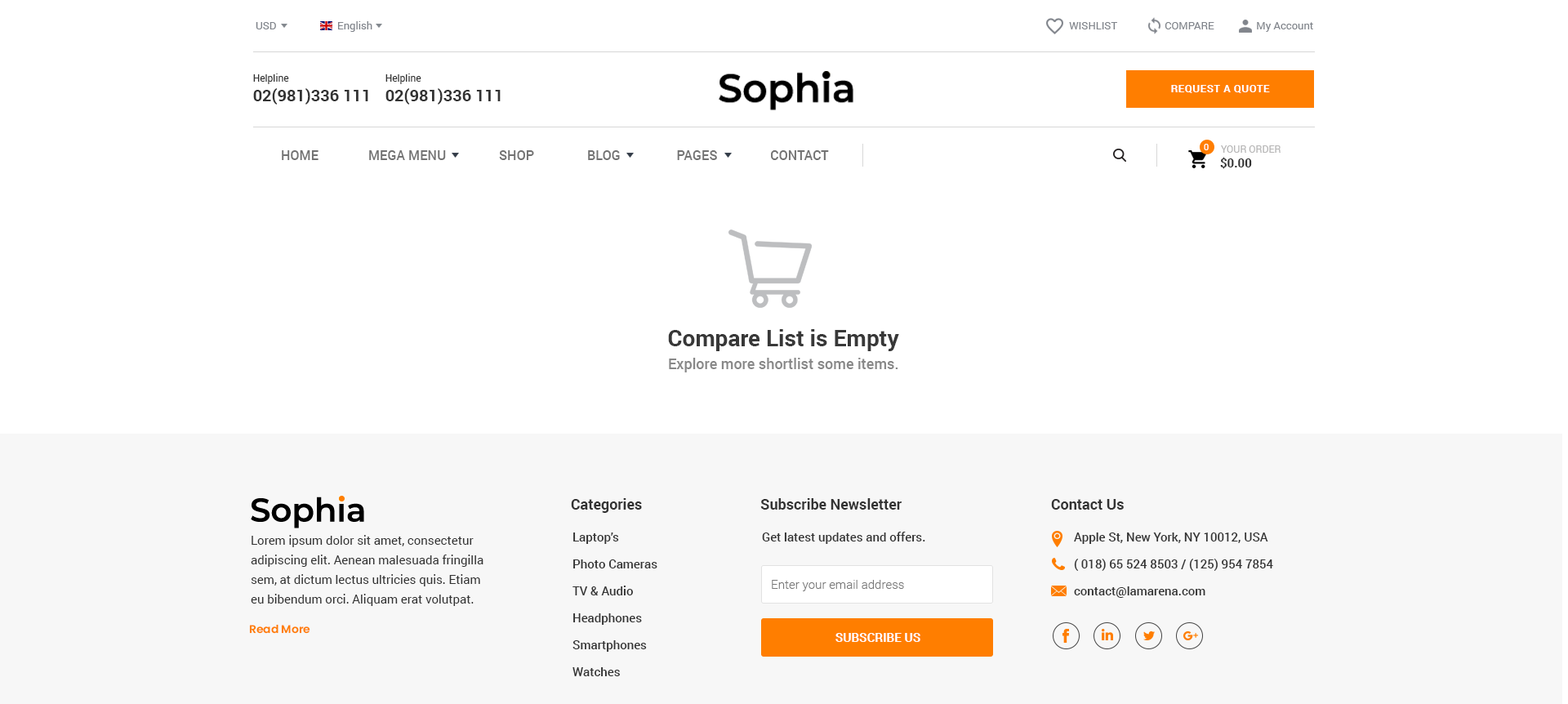
<style>
.page{position:relative;width:1568px;height:704px;background:#ffffff}
.page>*{position:absolute;margin:0}
.t1{font:10.6px "Roboto-Regular";color:#81858c}
.t2{font:16.3px "Roboto-Bold";color:#333333}
.t3{font:9.8px "Roboto-Regular";color:#333333}
.t4{font:10.6px "Roboto-Bold";letter-spacing:0.04em;color:#ffffff}
.t5{font:9px "Roboto-Regular";color:#ffffff}
.t6{font:9.8px "Roboto-Regular";color:#b8b7b7}
.t7{font:13.1px "Roboto-Medium";color:#737373}
.t8{font:12.2px "Roboto-Bold";color:#333333}
.t9{font:14.7px/22.9px "Roboto-Medium";color:#888888}
.t10{font:22.9px "Roboto-Bold";color:#383838}
.t11{font:14.7px "Roboto-Bold";color:#333333}
.t12{font:12.2px/26.9px "Roboto-Medium";color:#333333}
.t13{font:12.2px "Roboto-Medium";color:#333333}
.t14{font:12.2px/19.6px "Roboto-Regular";color:#333333}
.t15{font:12.2px "Roboto-Light";color:#777777}
.t16{font:11.1px "Poppins-SemiBold";color:#ff7e00}
.t17{font:12.2px "Roboto-Bold";color:#ffffff}
</style>
<div class="page">
<p class="t1" style="left:256px;top:22px;width:20px;height:7px">USD</p>
<p class="t1" style="left:338px;top:21px;width:34px;height:11px">English</p>
<p class="t1" style="left:1069px;top:22px;width:244px;height:10px">WISHLIST                  COMPARE                My Account</p>
<p class="t2" style="left:253px;top:74px;width:115px;height:31px"><span class="t3">Helpline<br></span>02(981)336 111</p>
<p class="t2" style="left:385px;top:74px;width:116px;height:31px"><span class="t3">Helpline<br></span>02(981)336 111</p>
<p class="t4" style="left:1171px;top:85px;width:99px;height:8px">REQUEST A QUOTE</p>
<p class="t5" style="left:1204px;top:144px;width:5px;height:6px">0</p>
<p class="t6" style="left:1221px;top:145px;width:60px;height:8px">YOUR ORDER</p>
<p class="t7" style="left:282px;top:150px;width:547px;height:10px">HOME               MEGA MENU                SHOP                BLOG                 PAGES                CONTACT</p>
<p class="t8" style="left:1220px;top:157px;width:32px;height:12px">$0.00</p>
<p class="t9" style="left:668px;top:329px;width:231px;height:43px;text-align:center"><span class="t10">Compare List is Empty<br></span>Explore more shortlist some items.</p>
<p class="t11" style="left:571px;top:498px;width:71px;height:15px">Categories</p>
<p class="t11" style="left:760px;top:498px;width:142px;height:12px">Subscribe Newsletter</p>
<p class="t11" style="left:1051px;top:499px;width:73px;height:11px">Contact Us</p>
<p class="t12" style="left:572px;top:532px;width:85px;height:144px">Laptop’s<br>Photo Cameras<br>TV &amp; Audio<br>Headphones<br>Smartphones<br>Watches</p>
<p class="t13" style="left:762px;top:532px;width:163px;height:12px">Get latest updates and offers.</p>
<p class="t12" style="left:1074px;top:532px;width:199px;height:66px">Apple St, New York, NY 10012, USA<br>( 018) 65 524 8503 / (125) 954 7854<br>contact@lamarena.com</p>
<p class="t14" style="left:251px;top:535px;width:232px;height:71px">Lorem ipsum dolor sit amet, consectetur adipiscing elit. Aenean malesuada fringilla sem, at dictum lectus ultricies quis. Etiam eu bibendum orci. Aliquam erat volutpat.</p>
<p class="t15" style="left:772px;top:580px;width:132px;height:11px">Enter your email address</p>
<p class="t16" style="left:249px;top:624px;width:61px;height:10px">Read More</p>
<p class="t17" style="left:835px;top:633px;width:85px;height:9px">SUBSCRIBE US</p>
</div>
